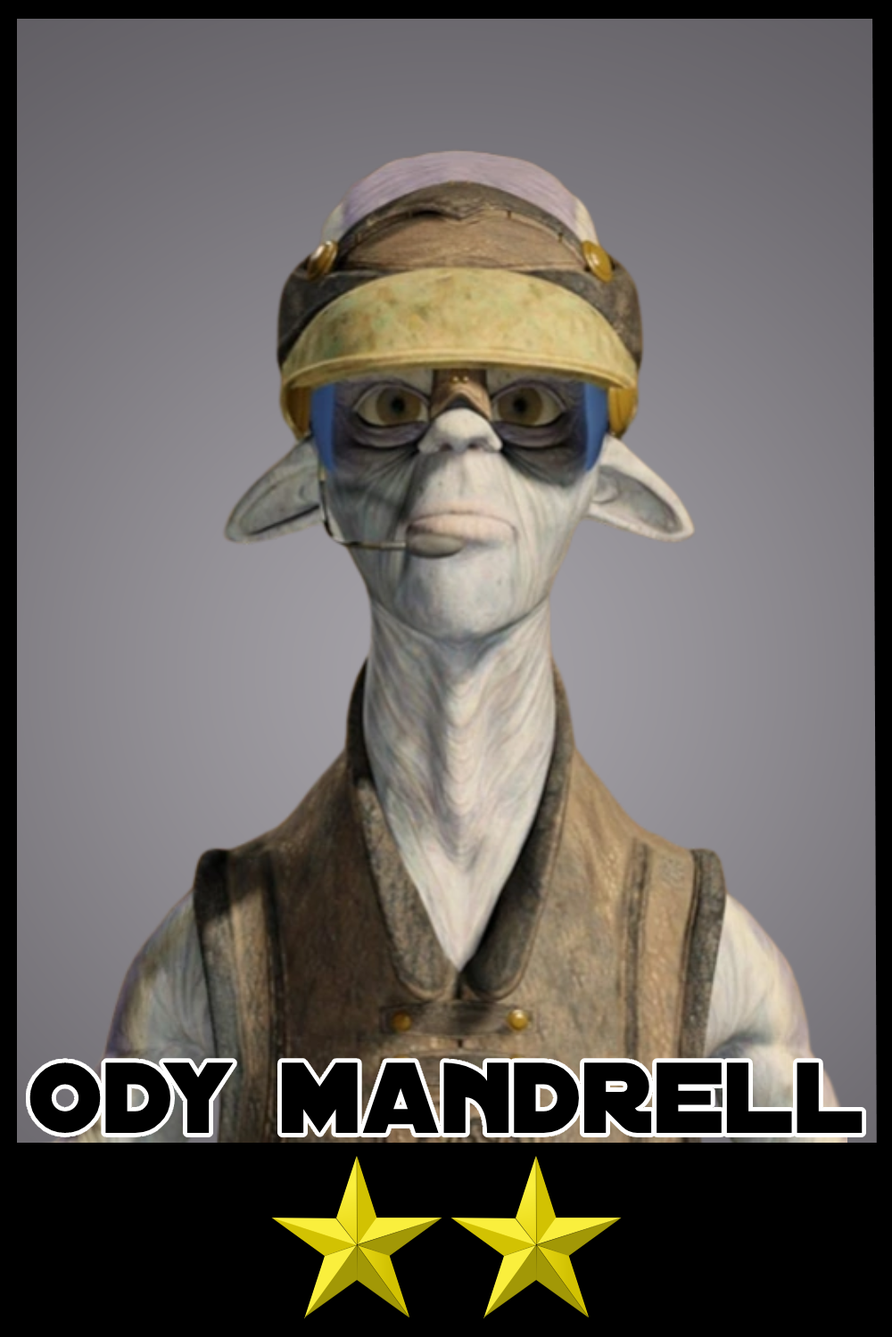
<style>
.page{position:relative;width:892px;height:1337px}
.page>*{position:absolute;margin:0}
.t1{font:108px "DistantGalaxy";color:#000000}
</style>
<div class="page">
<p class="t1" style="left:29px;top:1063px;width:833px;height:70px">ody mandrell</p>
</div>
